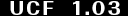
<style>
.page{position:relative;width:128px;height:16px;background:#000000}
.page>*{position:absolute;margin:0}
.t1{font:17px "FolkPro-Heavy";letter-spacing:0.165em;color:#ffffff}
</style>
<div class="page">
<p class="t1" style="left:10px;top:1px;width:44px;height:14px">UCF</p>
<p class="t1" style="left:73px;top:1px;width:47px;height:14px">1.03</p>
</div>
